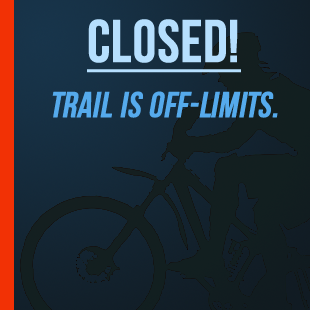
<style>
.page{position:relative;width:310px;height:310px}
.page>*{position:absolute;margin:0}
.t1{font:36px "BebasNeue";color:#55aaec;font-weight:bold;font-style:italic}
.t2{font:60px "BebasNeue";color:#b6dffe;font-weight:bold;text-decoration:underline}
</style>
<div class="page">
<p class="t1" style="left:52px;top:19px;width:226px;height:99px;text-align:center"><span class="t2">CLOSED!<br></span>Trail is off-limits.</p>
</div>
